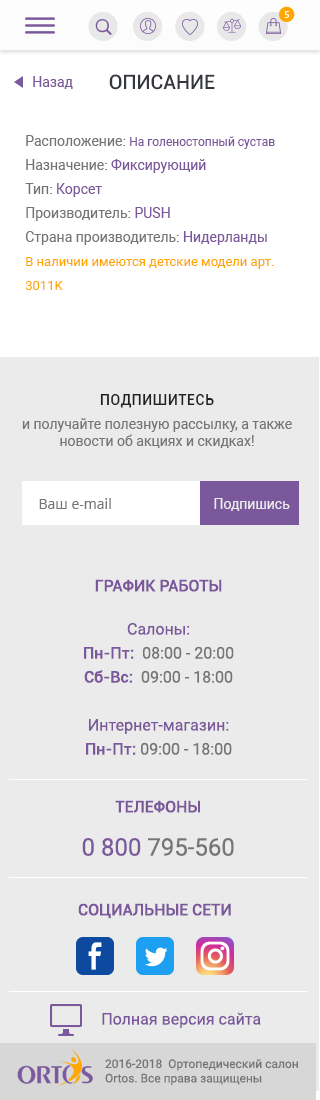
<style>
.page{position:relative;width:320px;height:1100px;background:#ebebeb}
.page>*{position:absolute;margin:0}
.t1{font:10.2px "MyriadPro-Regular";letter-spacing:0.1em;color:#ffffff;text-transform:uppercase}
.t2{font:14px "Roboto-Regular";color:#7b589c}
.t3{font:20px "Roboto-Medium";color:#34373d;text-transform:uppercase}
.t4{font:13px/24px "Roboto-Regular";color:#ffa700}
.t5{font:14px/24px "Roboto-Regular";color:#757575}
.t6{font:12px/24px "Roboto-Regular";color:#7b589c}
.t7{font:14px/24px "Roboto-Regular";color:#7b589c}
.t8{font:14px "Roboto-Medium";letter-spacing:0.05em;color:#212121;text-transform:uppercase}
.t9{font:14px "Roboto-Regular";color:#757575}
.t10{font:14px "OpenSans";color:#757575}
.t11{font:14px "Roboto-Regular";color:#ebebeb}
.t12{font:16px/24px "Roboto-Regular";color:#7b589c}
.t13{font:16px "Roboto-Medium";color:#7b589c;text-transform:uppercase}
.t14{font:16px/24px "Roboto-Medium";color:#7b589c}
.t15{font:16px/24px "Roboto-Regular";color:#757575}
.t16{font:24px/24px "Roboto-Regular";color:#7b589c}
.t17{font:24px/24px "Roboto-Regular";color:#757575}
.t18{font:16px "Roboto-Regular";color:#7b589c}
.t19{font:12px "Roboto-Regular";color:#757575}
</style>
<div class="page">
<p class="t1" style="left:284px;top:11px;width:5px;height:7px">5</p>
<p class="t2" style="left:33px;top:76px;width:40px;height:13px">Назад</p>
<p class="t3" style="left:109px;top:74px;width:106px;height:16px">Описание</p>
<p class="t4" style="left:25px;top:135px;width:250px;height:155px"><span class="t5">Расположение: </span><span class="t6">На голеностопный сустав<br></span><span class="t5">Назначение: </span><span class="t7">Фикcирующий<br></span><span class="t5">Тип: </span><span class="t7">Корсет<br></span><span class="t5">Производитель: </span><span class="t7">PUSH<br></span><span class="t5">Страна производитель: </span><span class="t7">Нидерланды<br></span>В наличии имеются детские модели арт. 3011K</p>
<p class="t5" style="left:22px;top:394px;width:270px;height:54px;text-align:center"><span class="t8">Подпишитесь <br></span>и получайте полезную рассылку, а также <span class="t9">новости об акциях и скидках!</span></p>
<p class="t10" style="left:39px;top:498px;width:72px;height:11px">Ваш e-mail</p>
<p class="t11" style="left:214px;top:498px;width:76px;height:13px">Подпишись</p>
<p class="t12" style="left:84px;top:579px;width:150px;height:176px;text-align:center"><span class="t13">График работы<br><br></span>Салоны: <br><span class="t14">Пн-Пт:</span><span class="t15">  08:00 - 20:00 <br></span><span class="t14">Сб-Вс:</span><span class="t15">  09:00 - 18:00<br><br></span>Интернет-магазин:<br><span class="t14">Пн-Пт:</span><span class="t15"> 09:00 - 18:00</span></p>
<p class="t13" style="left:82px;top:800px;width:152px;height:56px;text-align:center">Телефоны<br><br><span class="t16">0 800 </span><span class="t17">795-560</span></p>
<p class="t13" style="left:78px;top:903px;width:153px;height:16px">Социальные сети</p>
<p class="t18" style="left:102px;top:1012px;width:159px;height:16px">Полная версия сайта</p>
<p class="t19" style="left:105px;top:1059px;width:193px;height:26px">2016-2018  Ортопедический салон Ortos. Все права защищены</p>
</div>
